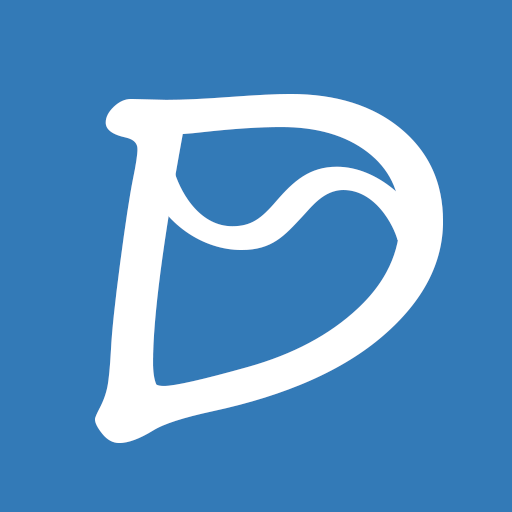
<style>
.page{position:relative;width:512px;height:512px;background:#337ab7}
.page>*{position:absolute;margin:0}
.t1{font:461px "SegoePrint";color:#ffffff;scale:1.11 1}
.t2{font:240.8px "LithosPro-Regular";color:#ffffff;scale:1.59 1}
</style>
<div class="page">
<p class="t1" style="left:95px;top:94px;width:348px;height:349px">D</p>
<p class="t2" style="left:146px;top:166px;width:281px;height:84px">S</p>
</div>
